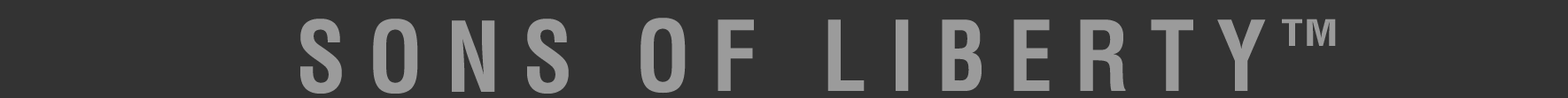
<style>
.page{position:relative;width:1568px;height:98px;background:#333333}
.page>*{position:absolute;margin:0}
.t1{font:95.5px "Helvetica-Condensed-Bold";letter-spacing:0.228em;color:#9b9b9b;scale:0.94 1}
.t2{font:95.5px "Helvetica-Condensed-Bold";letter-spacing:0.245em;color:#9b9b9b;scale:0.94 1}
.t3{font:35.7px "Helvetica-Condensed-Bold";letter-spacing:0.02em;color:#9b9b9b;scale:1.23 1}
</style>
<div class="page">
<p class="t1" style="left:640px;top:18px;width:114px;height:76px">OF</p>
<p class="t2" style="left:300px;top:19px;width:269px;height:75px">SONS</p>
<p class="t2" style="left:827px;top:19px;width:439px;height:72px">LIBERTY</p>
<p class="t3" style="left:1282px;top:19px;width:54px;height:27px">TM</p>
</div>
